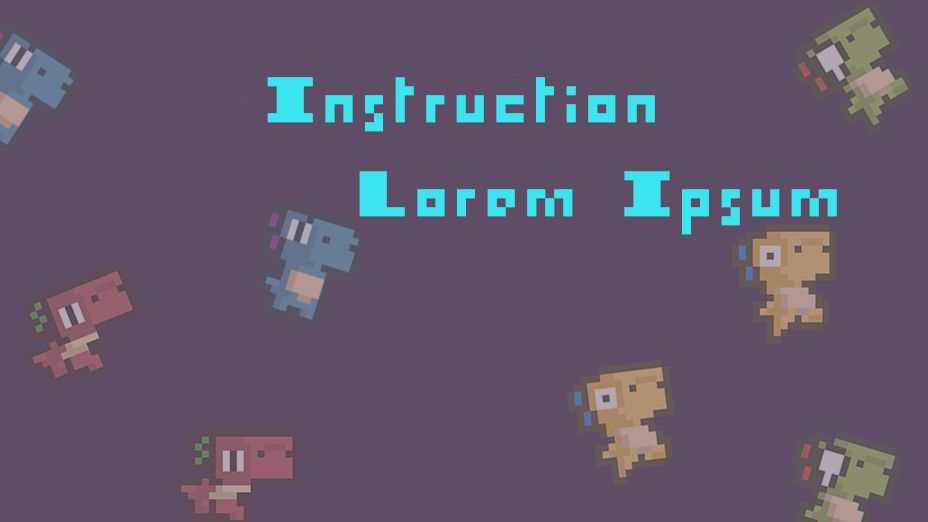
<style>
.page{position:relative;width:928px;height:522px;background:#5f4d65}
.page>*{position:absolute;margin:0}
.t1{font:72px "I-pixel-u";letter-spacing:0.05em;color:#3be5f0}
</style>
<div class="page">
<p class="t1" style="left:267px;top:77px;width:388px;height:55px">Instruction</p>
<p class="t1" style="left:359px;top:171px;width:478px;height:64px">Lorem Ipsum</p>
</div>
